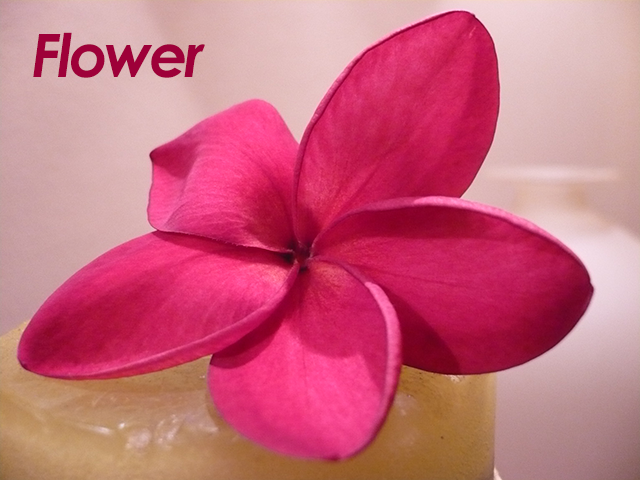
<style>
.page{position:relative;width:640px;height:480px}
.page>*{position:absolute;margin:0}
.t1{font:60px "CenturyGothic-BoldItalic";letter-spacing:-0.05em;color:#9e0039}
</style>
<div class="page">
<p class="t1" style="left:33px;top:32px;width:172px;height:46px">Flower</p>
</div>
